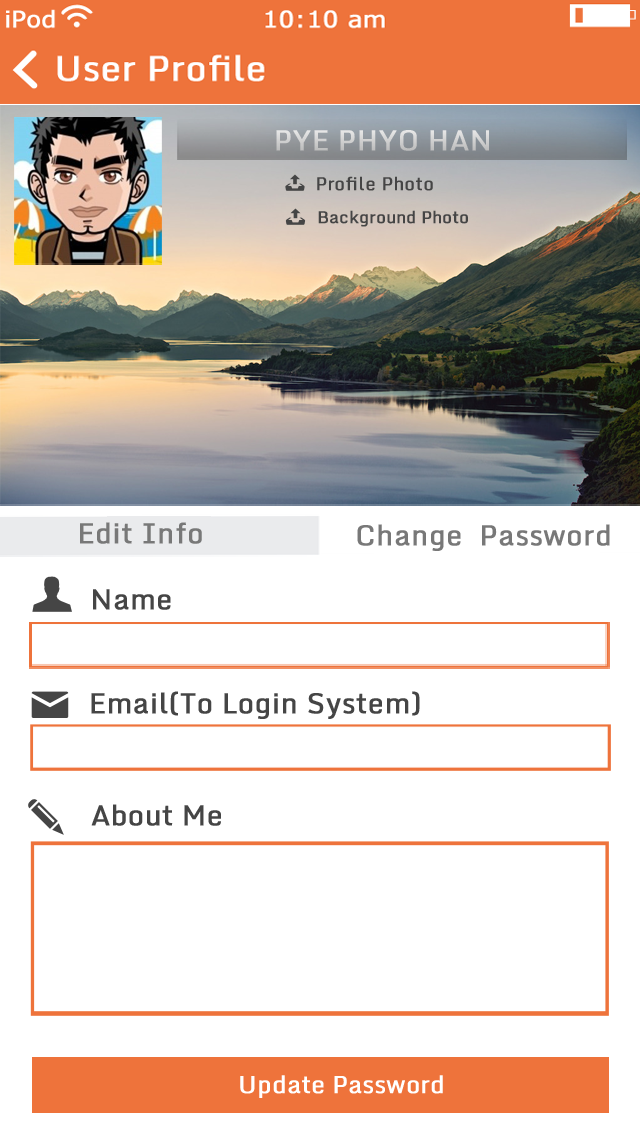
<style>
.page{position:relative;width:640px;height:1136px;background:#ffffff}
.page>*{position:absolute;margin:0}
.t1{font:28px "Monda-Regular";color:#d3d3d3;font-weight:bold}
.t2{font:18px "Monda-Regular";color:#454545;font-weight:bold}
.t3{font:16.7px "Monda-Regular";color:#454545;font-weight:bold}
.t4{font:28px "Monda-Regular";color:#787878;font-weight:bold}
.t5{font:28px "Monda-Regular";color:#454545;font-weight:bold}
.t6{font:24px "Monda-Regular";color:#ffffff;font-weight:bold}
</style>
<div class="page">
<p class="t1" style="left:276px;top:130px;width:213px;height:21px">PYE PHYO HAN</p>
<p class="t2" style="left:317px;top:176px;width:116px;height:15px">Profile Photo</p>
<p class="t3" style="left:318px;top:210px;width:150px;height:17px">Background Photo</p>
<p class="t4" style="left:80px;top:522px;width:122px;height:22px">Edit Info</p>
<p class="t4" style="left:357px;top:524px;width:253px;height:27px">Change  Password</p>
<p class="t5" style="left:93px;top:589px;width:78px;height:21px">Name</p>
<p class="t5" style="left:91px;top:691px;width:329px;height:28px">Email(To Login System)</p>
<p class="t5" style="left:91px;top:804px;width:130px;height:22px">About Me</p>
<p class="t6" style="left:240px;top:1075px;width:203px;height:23px">Update Password</p>
</div>
